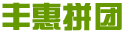
<style>
.page{position:relative;width:130px;height:35px;background:#ffffff}
.page>*{position:absolute;margin:0}
.t1{font:30px "JZhongYi";color:#669900;font-weight:bold}
</style>
<div class="page">
<p class="t1" style="left:2px;top:2px;width:120px;height:29px">丰惠拼团</p>
</div>
